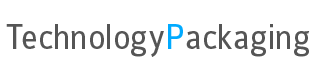
<style>
.page{position:relative;width:317px;height:79px;background:#ffffff}
.page>*{position:absolute;margin:0}
.t1{font:37.4px "Colaborate-Regular";color:#5e605e;scale:0.91 1}
.t2{font:37.4px "Colaborate-Regular";color:#00b3ff;scale:0.91 1}
</style>
<div class="page">
<p class="t1" style="left:6px;top:24px;width:158px;height:33px">Technology</p>
<p class="t1" style="left:168px;top:24px;width:142px;height:33px"><span class="t2">P</span>ackaging</p>
</div>
